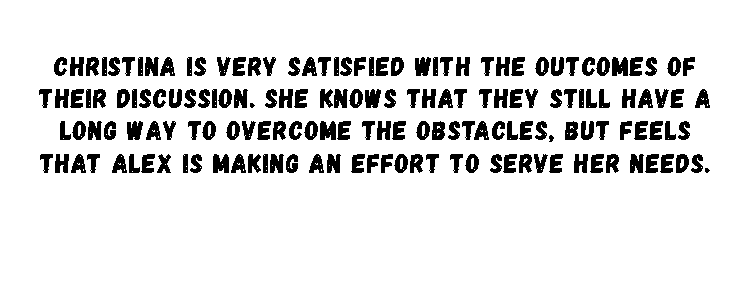
<style>
.page{position:relative;width:750px;height:282px;background:#ffffff}
.page>*{position:absolute;margin:0}
.t1{font:27px "Gagalin-Regular";letter-spacing:0.038em;color:#000000}
</style>
<div class="page">
<p class="t1" style="left:39px;top:57px;width:671px;height:116px;text-align:center">Christina is very satisfied with the outcomes of their discussion. She knows that they still have a long way to overcome the obstacles, but feels that Alex is making an effort to serve her needs.</p>
</div>
